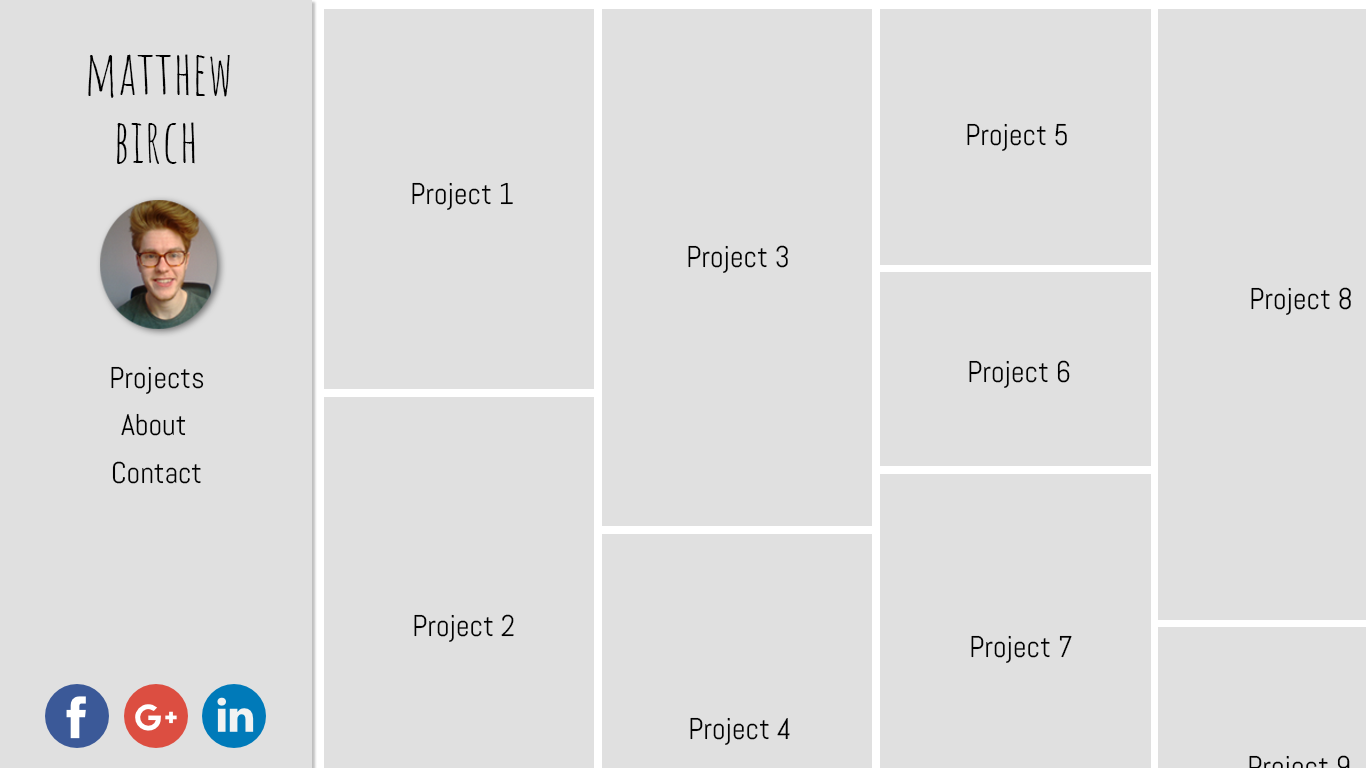
<style>
.page{position:relative;width:1366px;height:768px;background:#e0e0e0}
.page>*{position:absolute;margin:0}
.t1{font:60px "AmaticSC-Regular";color:#000000}
.t2{font:30px "Abel-Regular";color:#000000}
</style>
<div class="page">
<p class="t1" style="left:88px;top:54px;width:142px;height:44px">matthew</p>
<p class="t1" style="left:117px;top:122px;width:78px;height:42px">birch</p>
<p class="t2" style="left:967px;top:123px;width:100px;height:28px">Project 5</p>
<p class="t2" style="left:412px;top:182px;width:101px;height:28px">Project 1</p>
<p class="t2" style="left:688px;top:245px;width:100px;height:28px">Project 3</p>
<p class="t2" style="left:1251px;top:287px;width:100px;height:28px">Project 8</p>
<p class="t2" style="left:111px;top:366px;width:93px;height:28px">Projects</p>
<p class="t2" style="left:969px;top:360px;width:101px;height:28px">Project 6</p>
<p class="t2" style="left:121px;top:413px;width:65px;height:23px">About</p>
<p class="t2" style="left:112px;top:461px;width:89px;height:23px">Contact</p>
<p class="t2" style="left:414px;top:614px;width:100px;height:28px">Project 2</p>
<p class="t2" style="left:971px;top:635px;width:101px;height:28px">Project 7</p>
<p class="t2" style="left:690px;top:717px;width:100px;height:28px">Project 4</p>
</div>
